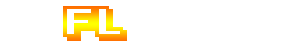
<style>
.page{position:relative;width:300px;height:48px;background:#ffffff}
.page>*{position:absolute;margin:0}
.t1{font:36px "KarmaticArcade"}
</style>
<div class="page">
<p class="t1" style="left:63px;top:6px;width:64px;height:35px">FL</p>
</div>
